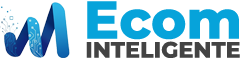
<style>
.page{position:relative;width:245px;height:60px;background:#ffffff}
.page>*{position:absolute;margin:0}
.t1{font:53.3px "Montserrat-ExtraBold";color:#06a3da}
.t2{font:22.3px "Montserrat-ExtraBold";color:#434343}
</style>
<div class="page">
<p class="t1" style="left:87px;top:1px;width:152px;height:39px">Ecom</p>
<p class="t2" style="left:86px;top:41px;width:154px;height:17px">INTELIGENTE</p>
</div>
